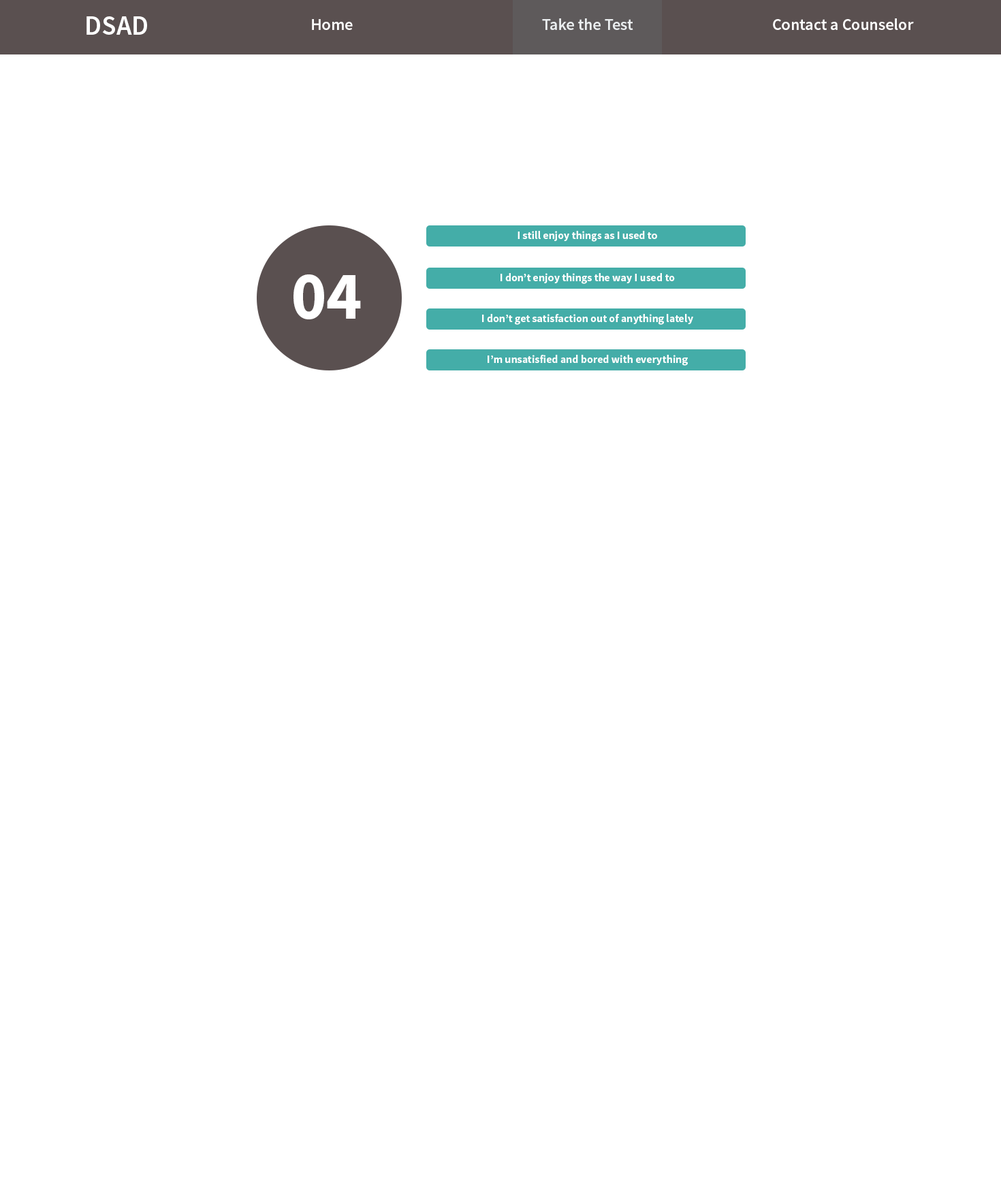
<style>
.page{position:relative;width:1001px;height:1191px;background:#ffffff}
.page>*{position:absolute;margin:0}
.t1{font:27.2px "SourceSansPro-Semibold";color:#ffffff}
.t2{font:16.3px "SourceSansPro-Semibold";color:#ffffff}
.t3{font:10.9px "SourceSansPro-Bold";color:#ffffff}
.t4{font:68.1px "SourceSansPro-Bold";color:#ffffff}
</style>
<div class="page">
<p class="t1" style="left:86px;top:16px;width:61px;height:19px">DSAD</p>
<p class="t2" style="left:312px;top:19px;width:41px;height:11px">Home</p>
<p class="t2" style="left:542px;top:18px;width:91px;height:12px">Take the Test</p>
<p class="t2" style="left:773px;top:18px;width:141px;height:12px">Contact a Counselor</p>
<p class="t3" style="left:518px;top:231px;width:139px;height:11px">I still enjoy things as I used to</p>
<p class="t4" style="left:294px;top:274px;width:67px;height:45px">04</p>
<p class="t3" style="left:501px;top:273px;width:174px;height:11px">I don’t enjoy things the way I used to</p>
<p class="t3" style="left:482px;top:314px;width:211px;height:11px">I don’t get satisfaction out of anything lately</p>
<p class="t3" style="left:488px;top:355px;width:200px;height:11px">I’m unsatisfied and bored with everything</p>
</div>
